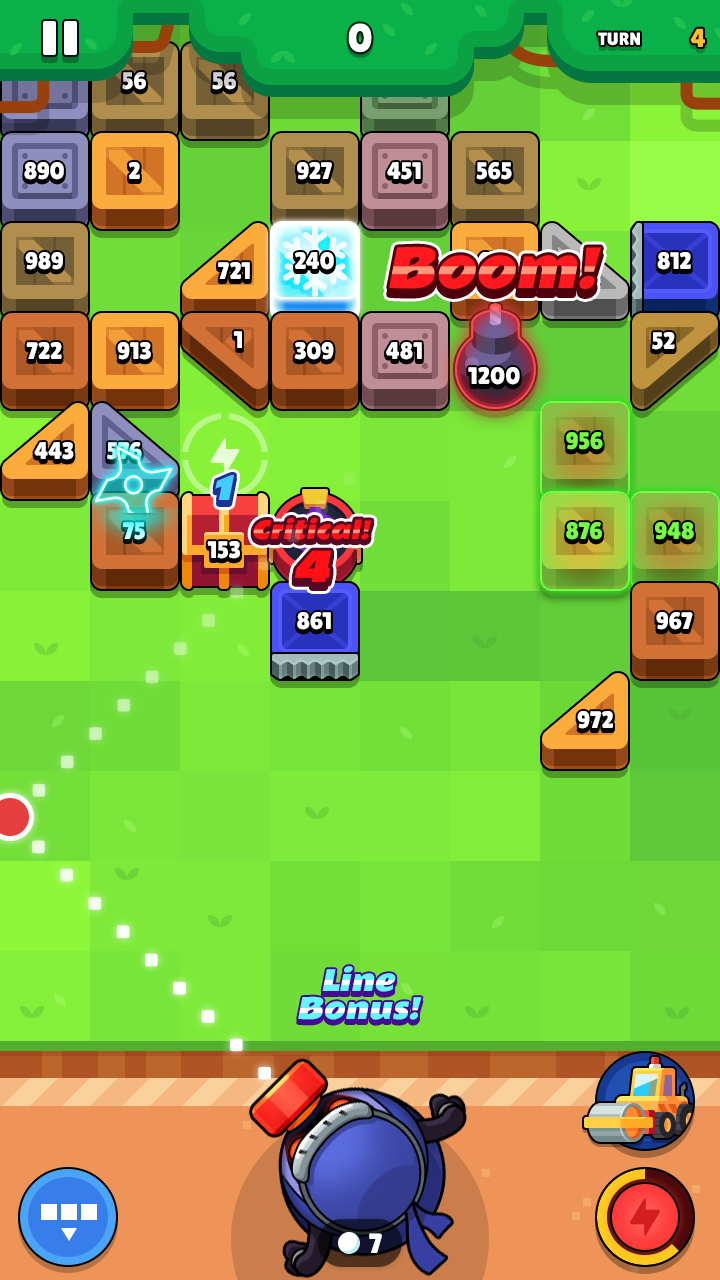
<style>
.page{position:relative;width:720px;height:1280px}
.page>*{position:absolute;margin:0}
.t1{font:40px "LilitaOne";color:#ffffff}
.t2{font:26px "LilitaOne";color:#ffbe2e;text-transform:uppercase}
.t3{font:18px "LilitaOne";color:#ffffff;text-transform:uppercase}
.t4{font:24px "LilitaOne";color:#ffffff}
.t5{font:24px "LilitaOne";color:#cfcfcf}
.t6{font:24px "LilitaOne";letter-spacing:0.02em;color:#ffffff}
.t7{font:24px "LilitaOne";color:#75fc45}
.t8{font:24px "LilitaOne"}
.t9{font:28px "LilitaOne";color:#ffffff}
</style>
<div class="page">
<p class="t1" style="left:348px;top:23px;width:24px;height:30px">0</p>
<p class="t2" style="left:690px;top:28px;width:15px;height:19px">4</p>
<p class="t3" style="left:598px;top:32px;width:42px;height:14px">turn</p>
<p class="t4" style="left:122px;top:72px;width:24px;height:18px">56</p>
<p class="t5" style="left:212px;top:72px;width:24px;height:18px">56</p>
<p class="t4" style="left:24px;top:162px;width:40px;height:18px">890</p>
<p class="t4" style="left:129px;top:162px;width:11px;height:17px">2</p>
<p class="t4" style="left:297px;top:162px;width:35px;height:18px">927</p>
<p class="t4" style="left:387px;top:162px;width:34px;height:18px">451</p>
<p class="t4" style="left:476px;top:162px;width:36px;height:18px">565</p>
<p class="t4" style="left:25px;top:252px;width:38px;height:18px">989</p>
<p class="t4" style="left:295px;top:252px;width:39px;height:18px">240</p>
<p class="t4" style="left:657px;top:252px;width:34px;height:18px">812</p>
<p class="t4" style="left:218px;top:262px;width:32px;height:17px">721</p>
<p class="t4" style="left:26px;top:342px;width:36px;height:17px">722</p>
<p class="t4" style="left:117px;top:342px;width:34px;height:18px">913</p>
<p class="t4" style="left:233px;top:331px;width:9px;height:17px">1</p>
<p class="t4" style="left:294px;top:342px;width:40px;height:18px">309</p>
<p class="t6" style="left:386px;top:342px;width:36px;height:18px">481</p>
<p class="t4" style="left:652px;top:332px;width:23px;height:18px">52</p>
<p class="t6" style="left:468px;top:367px;width:52px;height:18px">1200</p>
<p class="t7" style="left:566px;top:432px;width:37px;height:18px">956</p>
<p class="t4" style="left:34px;top:442px;width:40px;height:18px">443</p>
<p class="t8" style="left:107px;top:442px;width:35px;height:18px">576</p>
<p class="t8" style="left:123px;top:522px;width:22px;height:18px">75</p>
<p class="t7" style="left:566px;top:522px;width:36px;height:18px">876</p>
<p class="t7" style="left:655px;top:522px;width:39px;height:18px">948</p>
<p class="t4" style="left:207px;top:541px;width:33px;height:18px">153</p>
<p class="t4" style="left:297px;top:612px;width:34px;height:18px">861</p>
<p class="t4" style="left:656px;top:612px;width:37px;height:18px">967</p>
<p class="t4" style="left:577px;top:711px;width:36px;height:18px">972</p>
<p class="t9" style="left:369px;top:1233px;width:13px;height:20px">7</p>
</div>
